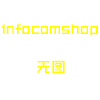
<style>
.page{position:relative;width:100px;height:100px;background:#ffffff}
.page>*{position:absolute;margin:0}
.t1{font:14.9px "ZHSCNMT--GBK1-0";color:#fefb04}
</style>
<div class="page">
<p class="t1" style="left:1px;top:24px;width:97px;height:12px">infocomshop</p>
<p class="t1" style="left:36px;top:60px;width:29px;height:13px">无图</p>
</div>
